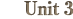
<style>
.page{position:relative;width:73px;height:19px;background:#ffffff}
.page>*{position:absolute;margin:0}
.t1{font:18px "RyuminPro-ExBold";letter-spacing:-0.05em;font-weight:bold}
</style>
<div class="page">
<p class="t1" style="left:24px;top:1px;width:50px;height:15px">Unit 3</p>
</div>
